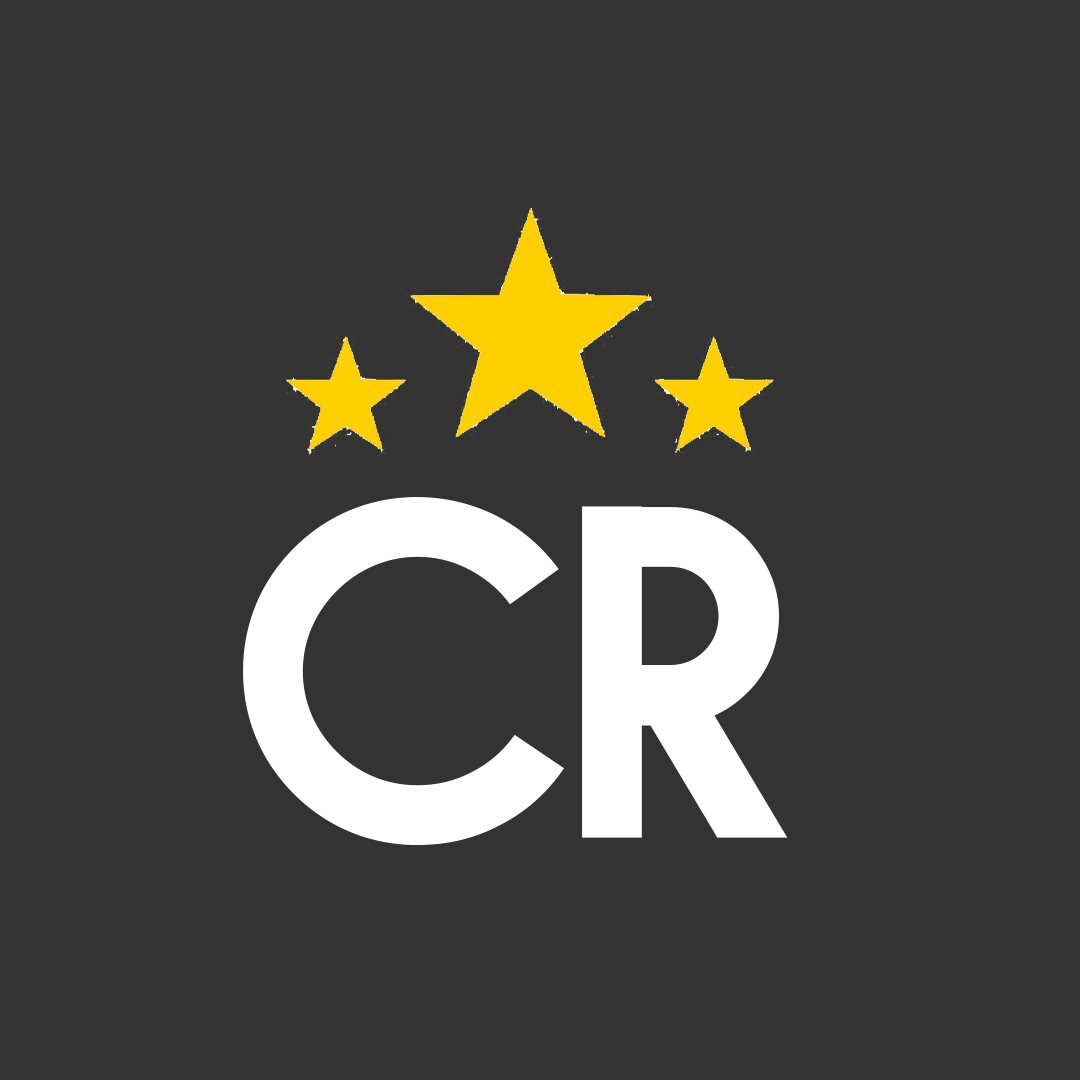
<style>
.page{position:relative;width:1080px;height:1080px;background:#333333}
.page>*{position:absolute;margin:0}
.t1{font:586.9px "NOVAegular";color:#ffffff}
</style>
<div class="page">
<p class="t1" style="left:243px;top:497px;width:545px;height:348px">CR</p>
</div>
